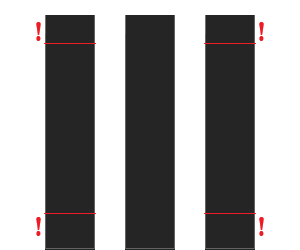
<style>
.page{position:relative;width:300px;height:250px;background:#ffffff}
.page>*{position:absolute;margin:0}
.t1{font:24px "BernardMT-Condensed";color:#ed1c24}
</style>
<div class="page">
<p class="t1" style="left:36px;top:22px;width:5px;height:19px">!</p>
<p class="t1" style="left:259px;top:22px;width:5px;height:19px">!</p>
<p class="t1" style="left:36px;top:217px;width:5px;height:19px">!</p>
<p class="t1" style="left:259px;top:217px;width:5px;height:19px">!</p>
</div>
